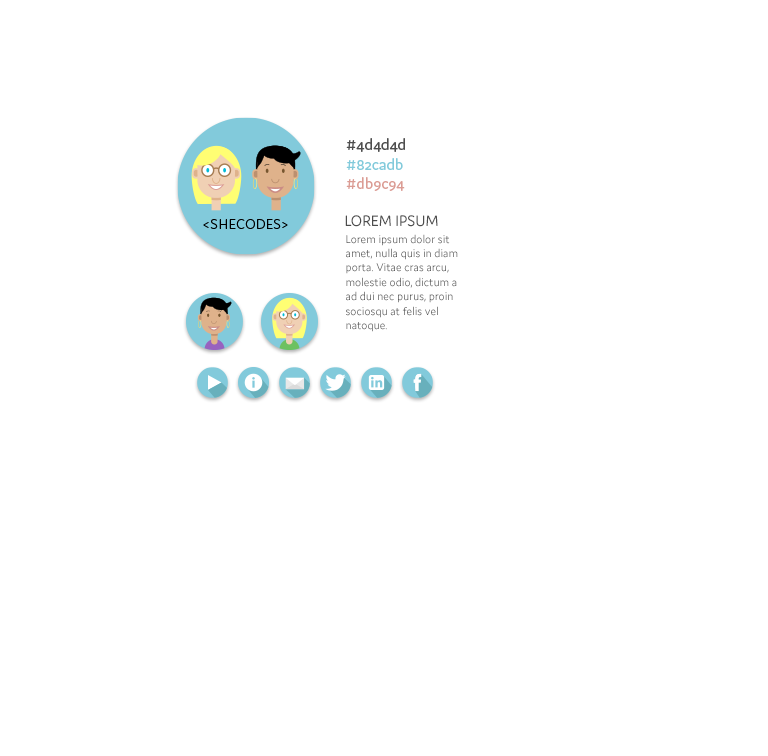
<style>
.page{position:relative;width:768px;height:756px;background:#ffffff}
.page>*{position:absolute;margin:0}
.t1{font:16px "Domus-Regular";color:#4d4d4d}
.t2{font:12px "Domus-Light"}
</style>
<div class="page">
<p class="t1" style="left:345px;top:215px;width:93px;height:12px">LOREM IPSUM</p>
<p class="t2" style="left:346px;top:234px;width:112px;height:98px">Lorem ipsum dolor sit amet, nulla quis in diam porta. Vitae cras arcu, molestie odio, dictum a ad dui nec purus, proin sociosqu at felis vel natoque.</p>
</div>
